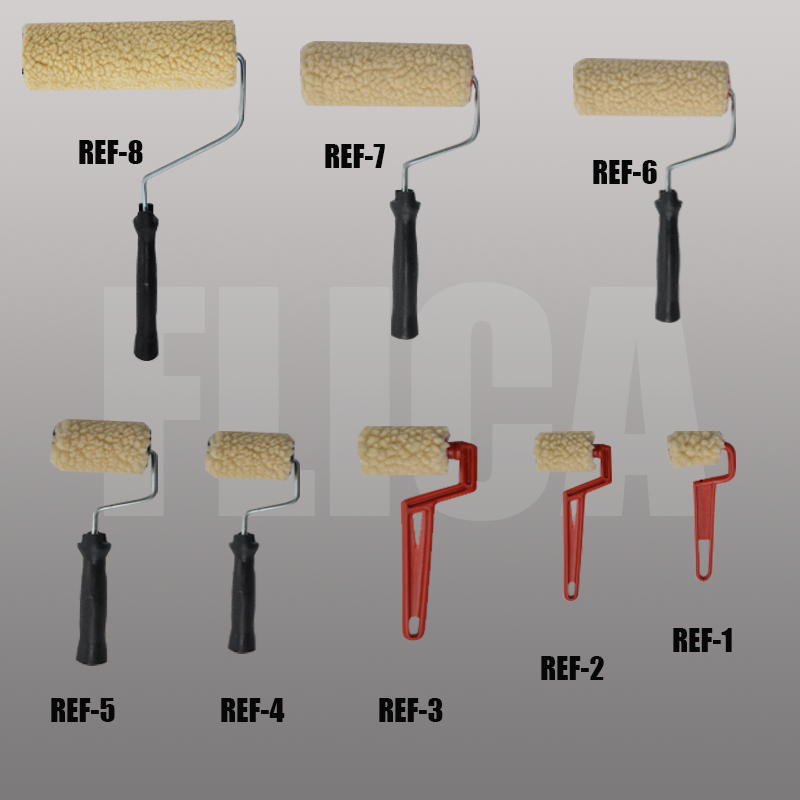
<style>
.page{position:relative;width:800px;height:800px}
.page>*{position:absolute;margin:0}
.t1{font:30px "Impact";color:#070707}
</style>
<div class="page">
<p class="t1" style="left:79px;top:140px;width:64px;height:24px">REF-8</p>
<p class="t1" style="left:325px;top:144px;width:60px;height:24px">REF-7</p>
<p class="t1" style="left:593px;top:160px;width:64px;height:24px">REF-6</p>
<p class="t1" style="left:673px;top:628px;width:59px;height:24px">REF-1</p>
<p class="t1" style="left:541px;top:656px;width:63px;height:24px">REF-2</p>
<p class="t1" style="left:51px;top:698px;width:64px;height:24px">REF-5</p>
<p class="t1" style="left:221px;top:698px;width:64px;height:24px">REF-4</p>
<p class="t1" style="left:379px;top:698px;width:64px;height:24px">REF-3</p>
</div>
